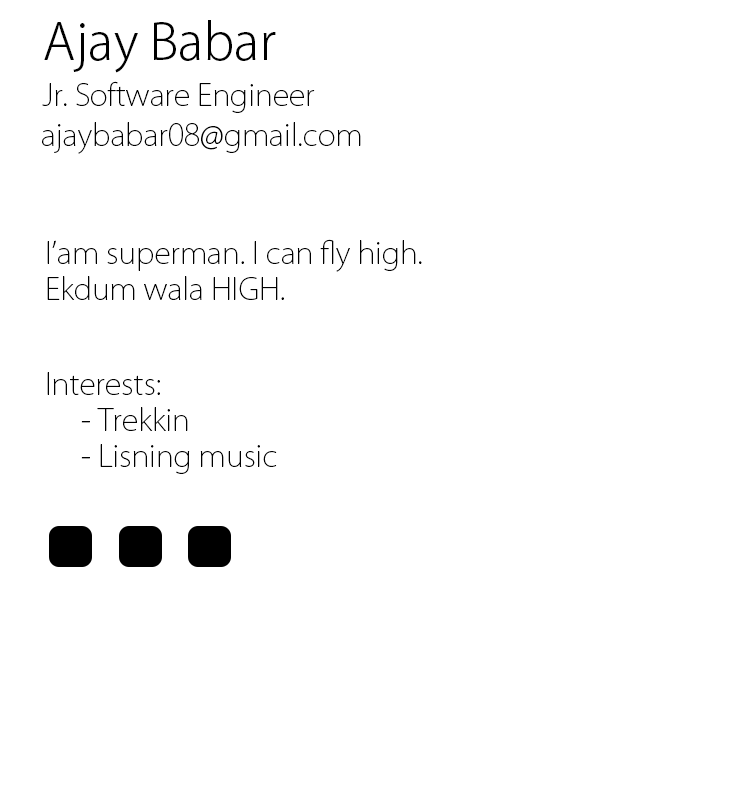
<style>
.page{position:relative;width:750px;height:792px;background:#ffffff}
.page>*{position:absolute;margin:0}
.t1{font:50px "KozGoPr6N-Light";color:#000000}
.t2{font:30px "KozGoPr6N-ExtraLight";color:#000000}
</style>
<div class="page">
<p class="t1" style="left:44px;top:20px;width:232px;height:53px">Ajay Babar</p>
<p class="t2" style="left:42px;top:81px;width:273px;height:32px">Jr. Software Engineer</p>
<p class="t2" style="left:42px;top:122px;width:319px;height:32px">ajaybabar08@gmail.com</p>
<p class="t2" style="left:47px;top:239px;width:375px;height:61px">I’am superman. I can fly high.<br>Ekdum wala HIGH.</p>
<p class="t2" style="left:47px;top:372px;width:230px;height:102px">Interests:<br> - Trekkin<br> - Lisning music</p>
</div>
